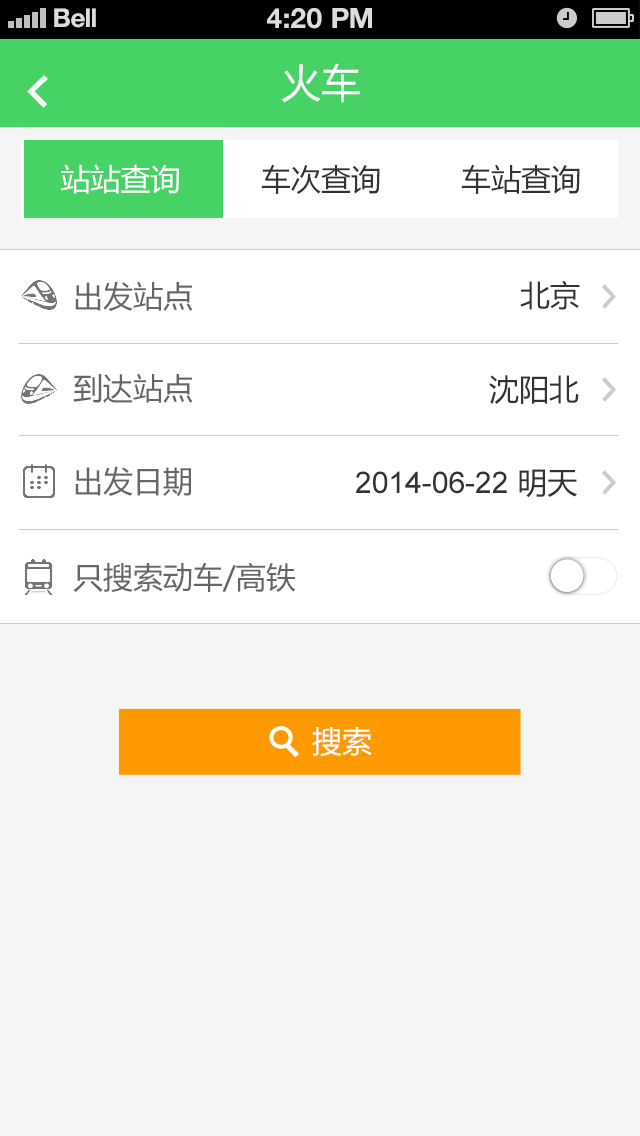
<style>
.page{position:relative;width:640px;height:1136px;background:#f5f5f5}
.page>*{position:absolute;margin:0}
.t1{font:26px "HelveticaNeue-Bold";color:#dddddd}
.t2{font:28px "HelveticaNeue-Bold";color:#dddddd;text-transform:uppercase}
.t3{font:40px "MicrosoftYaHei";color:#fefefe}
.t4{font:30px "MicrosoftYaHei";color:#ffffff}
.t5{font:30px "MicrosoftYaHei";color:#333333}
.t6{font:30px "MicrosoftYaHei";color:#666666}
.t7{font:30px "ArialMT";color:#333333}
</style>
<div class="page">
<p class="t1" style="left:54px;top:8px;width:42px;height:20px">Bell</p>
<p class="t2" style="left:267px;top:8px;width:105px;height:21px">4:20 pM</p>
<p class="t3" style="left:281px;top:63px;width:79px;height:40px">火车</p>
<p class="t4" style="left:60px;top:164px;width:119px;height:30px">站站查询</p>
<p class="t5" style="left:261px;top:164px;width:119px;height:30px">车次查询</p>
<p class="t5" style="left:461px;top:164px;width:119px;height:30px">车站查询</p>
<p class="t6" style="left:75px;top:281px;width:118px;height:30px">出发站点</p>
<p class="t5" style="left:520px;top:280px;width:60px;height:30px">北京</p>
<p class="t6" style="left:73px;top:373px;width:120px;height:30px">到达站点</p>
<p class="t5" style="left:489px;top:375px;width:90px;height:29px">沈阳北</p>
<p class="t6" style="left:75px;top:466px;width:116px;height:31px">出发日期</p>
<p class="t7" style="left:356px;top:469px;width:221px;height:29px">2014-06-22<span class="t5"> 明天</span></p>
<p class="t6" style="left:73px;top:562px;width:223px;height:30px">只搜索动车/高铁</p>
<p class="t4" style="left:312px;top:727px;width:60px;height:29px">搜索</p>
</div>
